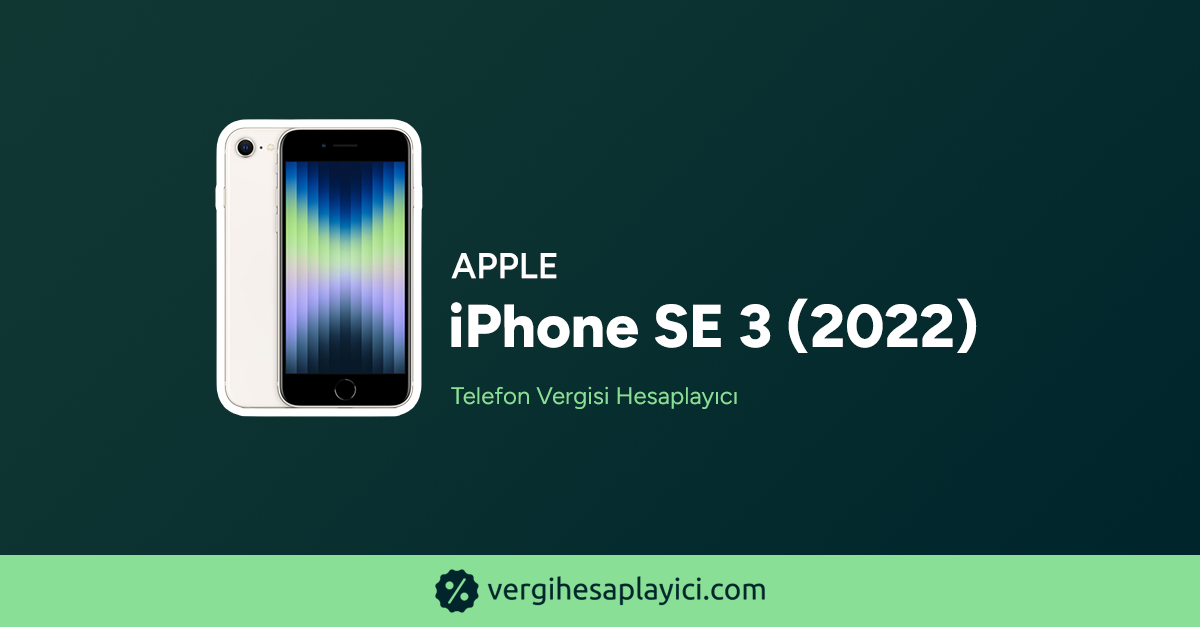
<style>
.page{position:relative;width:1200px;height:627px}
.page>*{position:absolute;margin:0}
.t1{font:36px "Figtree-SemiBold";color:#ffffff;text-transform:uppercase;font-weight:bold}
.t2{font:60.3px "Figtree-ExtraBold";color:#ffffff;font-weight:bold}
.t3{font:24px "Figtree-Regular";color:#88df95;font-weight:bold}
</style>
<div class="page">
<p class="t1" style="left:451px;top:253px;width:106px;height:26px">Apple</p>
<p class="t2" style="left:451px;top:298px;width:526px;height:55px">iPhone SE 3 (2022)</p>
<p class="t3" style="left:451px;top:386px;width:286px;height:23px">Telefon Vergisi Hesaplayıcı</p>
</div>
